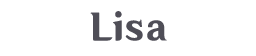
<style>
.page{position:relative;width:256px;height:56px;background:#ffffff}
.page>*{position:absolute;margin:0}
.t1{font:36px "HYWenHei-HEW";color:#4f4e57}
</style>
<div class="page">
<p class="t1" style="left:90px;top:11px;width:77px;height:30px">Lisa</p>
</div>
